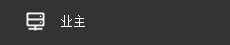
<style>
.page{position:relative;width:230px;height:45px;background:#333333}
.page>*{position:absolute;margin:0}
.t1{font:13px "SimSun";color:#ffffff}
</style>
<div class="page">
<p class="t1" style="left:61px;top:15px;width:24px;height:12px">业主</p>
</div>
